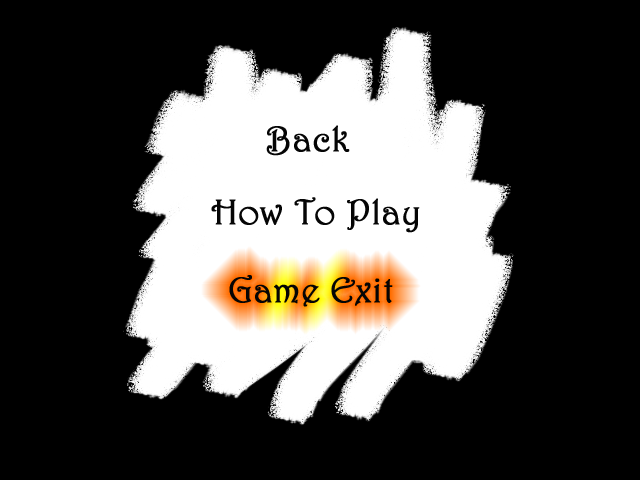
<style>
.page{position:relative;width:640px;height:480px;background:#000000}
.page>*{position:absolute;margin:0}
.t1{font:36px "Harrington";color:#050505;font-weight:bold}
</style>
<div class="page">
<p class="t1" style="left:266px;top:125px;width:84px;height:31px">Back</p>
<p class="t1" style="left:211px;top:197px;width:209px;height:36px">How To Play</p>
<p class="t1" style="left:229px;top:275px;width:164px;height:32px">Game Exit</p>
</div>
